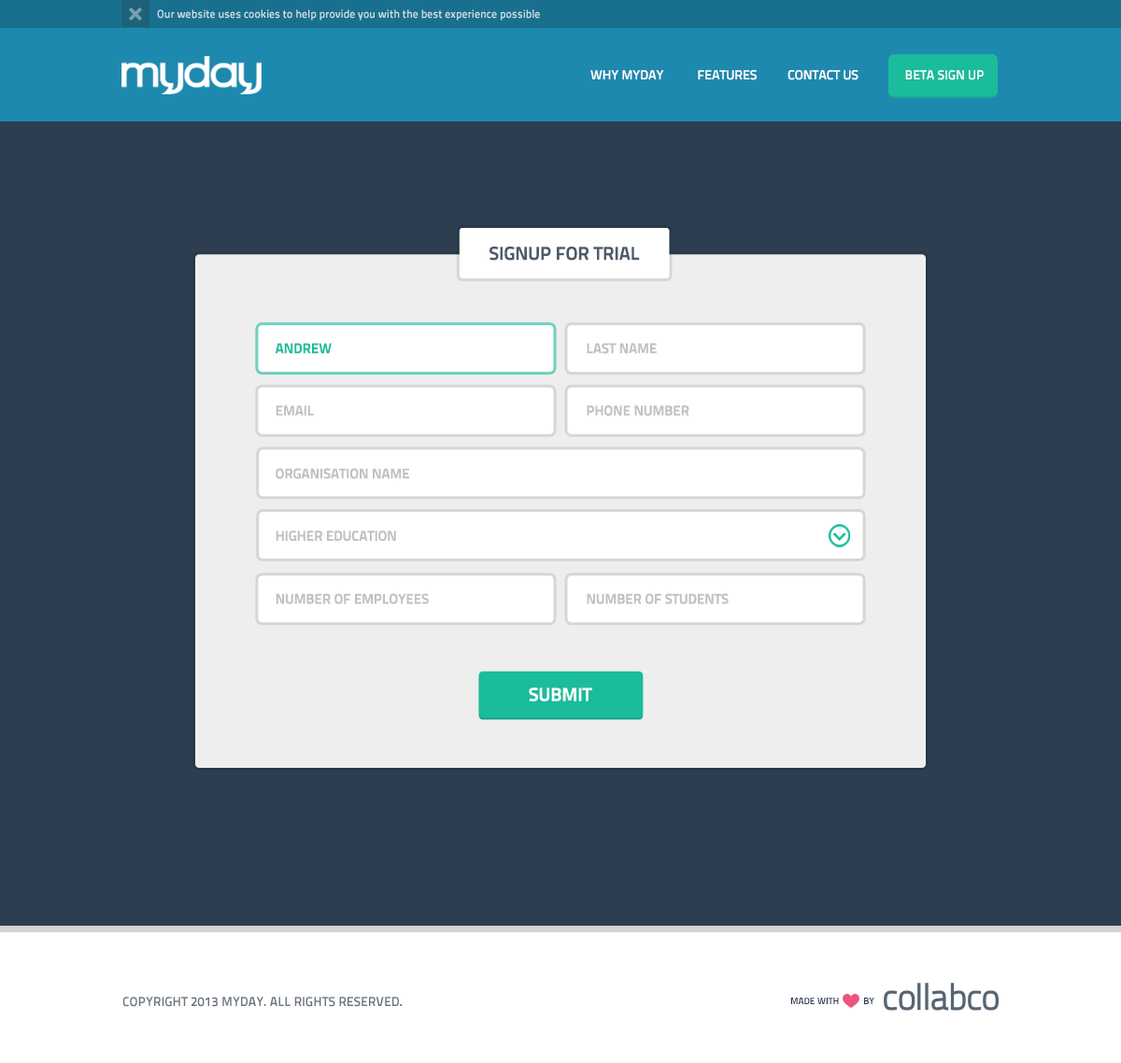
<style>
.page{position:relative;width:1121px;height:1063px;background:#2c3e50}
.page>*{position:absolute;margin:0}
.t1{font:11.2px "TitilliumText25L-800wt";color:#cddbe1}
.t2{font:13.1px "TitilliumText25L-600wt";color:#ffffff}
.t3{font:13.1px "TitilliumText25L-800wt";color:#ffffff;text-transform:uppercase}
.t4{font:18.7px "TitilliumText25L-800wt";color:#4e5b68;text-transform:uppercase}
.t5{font:14px "TitilliumText25L-800wt";color:#1abc9c;text-transform:uppercase}
.t6{font:14px "TitilliumText25L-800wt";color:#bec1c5;text-transform:uppercase}
.t7{font:18.7px "TitilliumText25L-800wt";color:#ffffff;text-transform:uppercase}
.t8{font:13.1px "TitilliumText25L-800wt";color:#6a747e;text-transform:uppercase}
.t9{font:9.3px "TitilliumText25L-800wt";color:#2c3e50;text-transform:uppercase}
</style>
<div class="page">
<p class="t1" style="left:157px;top:9px;width:383px;height:12px">Our website uses cookies to help provide you with the best experience possible</p>
<p class="t2" style="left:591px;top:70px;width:268px;height:10px">WHY MYDAY           FEATURES          CONTACT US</p>
<p class="t3" style="left:905px;top:70px;width:79px;height:10px">Beta Sign Up</p>
<p class="t4" style="left:490px;top:247px;width:150px;height:14px">Signup for Trial</p>
<p class="t5" style="left:276px;top:343px;width:56px;height:11px">Andrew</p>
<p class="t6" style="left:587px;top:343px;width:70px;height:11px">last name</p>
<p class="t6" style="left:276px;top:406px;width:38px;height:10px">email</p>
<p class="t6" style="left:587px;top:406px;width:103px;height:10px">phone number</p>
<p class="t6" style="left:276px;top:468px;width:133px;height:11px">organisation name</p>
<p class="t6" style="left:276px;top:531px;width:120px;height:10px">higher education</p>
<p class="t6" style="left:276px;top:593px;width:153px;height:12px">Number of employees</p>
<p class="t6" style="left:587px;top:593px;width:142px;height:12px">number of students</p>
<p class="t7" style="left:529px;top:688px;width:63px;height:14px">submit</p>
<p class="t8" style="left:122px;top:997px;width:280px;height:10px">Copyright 2013 Myday. All rights reserved.</p>
<p class="t9" style="left:791px;top:998px;width:84px;height:7px">made with           by</p>
</div>
